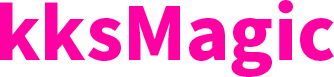
<style>
.page{position:relative;width:334px;height:77px;background:#ffffff}
.page>*{position:absolute;margin:0}
.t1{font:72px "SourceHanSansCN-Heavy";color:#ff00a2}
</style>
<div class="page">
<p class="t1" style="left:0px;top:0px;width:334px;height:77px">kksMagic</p>
</div>
